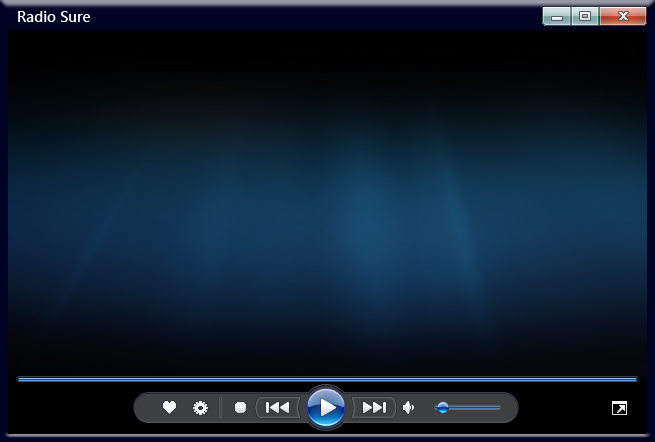
<style>
.page{position:relative;width:655px;height:442px}
.page>*{position:absolute;margin:0}
.t1{font:15px "SegoeUI-SemiBold";color:#ffffff}
</style>
<div class="page">
<p class="t1" style="left:18px;top:11px;width:72px;height:11px">Radio Sure</p>
</div>
